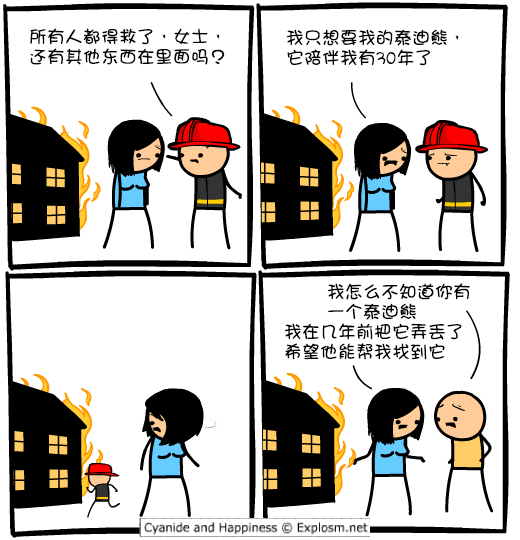
<style>
.page{position:relative;width:520px;height:540px;background:#ffffff}
.page>*{position:absolute;margin:0}
.t1{font:18px/20px "DFGirl";color:#000000}
</style>
<div class="page">
<p class="t1" style="left:30px;top:28px;width:195px;height:37px">所有人都得救了，女士，<br>还有其他东西在里面吗？</p>
<p class="t1" style="left:286px;top:29px;width:173px;height:37px">我只想要我的泰迪熊，<br>它陪伴我有30年了</p>
<p class="t1" style="left:327px;top:283px;width:143px;height:37px">我怎么不知道你有<br>一个泰迪熊</p>
<p class="t1" style="left:284px;top:323px;width:178px;height:37px">我在几年前把它弄丢了<br>希望他能帮我找到它</p>
</div>
